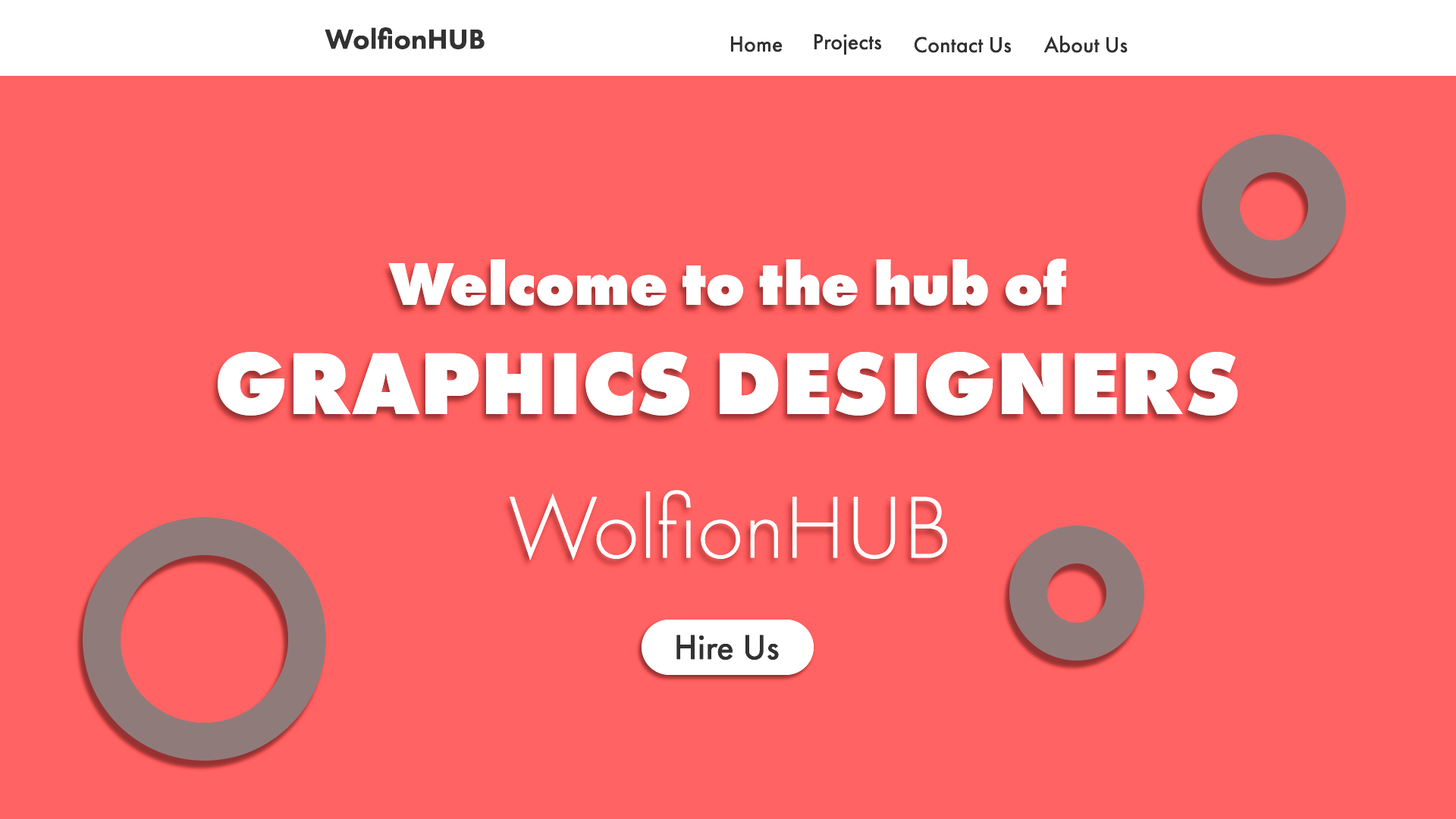
<style>
.page{position:relative;width:1456px;height:819px;background:#ff6363}
.page>*{position:absolute;margin:0}
.t1{font:28.8px "FuturaPT-Heavy";color:#323232}
.t2{font:22.7px "FuturaPT-Medium";color:#323232}
.t3{font:62.2px "FuturaPT-ExtraBold";color:#ffffff}
.t4{font:91px "FuturaPT-ExtraBold";color:#ffffff}
.t5{font:91px "FuturaPT-Light";color:#ffffff}
.t6{font:36.4px "FuturaPT-Medium";color:#323232}
</style>
<div class="page">
<p class="t1" style="left:325px;top:27px;width:160px;height:22px">WolfionHUB</p>
<p class="t2" style="left:730px;top:36px;width:53px;height:16px">Home</p>
<p class="t2" style="left:814px;top:33px;width:68px;height:22px">Projects</p>
<p class="t2" style="left:914px;top:36px;width:98px;height:17px">Contact Us</p>
<p class="t2" style="left:1043px;top:36px;width:85px;height:17px">About Us</p>
<p class="t3" style="left:218px;top:259px;width:1020px;height:157px;text-align:center">Welcome to the hub of<br><span class="t4">GRAPHICS DESIGNERS</span></p>
<p class="t5" style="left:510px;top:490px;width:437px;height:70px">WolfionHUB</p>
<p class="t6" style="left:676px;top:635px;width:103px;height:25px">Hire Us</p>
</div>
